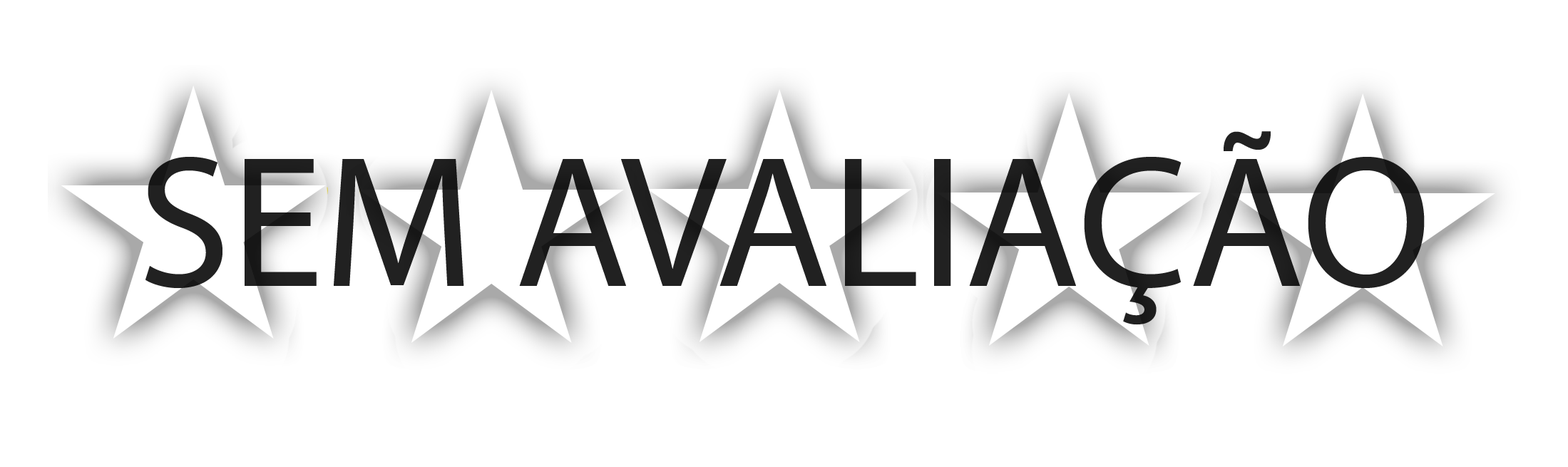
<style>
.page{position:relative;width:1568px;height:467px;background:#ffffff}
.page>*{position:absolute;margin:0}
.t1{font:188.8px "MyriadPro-Regular";color:#212121}
</style>
<div class="page">
<p class="t1" style="left:145px;top:131px;width:1280px;height:194px">SEM AVALIAÇÃO</p>
</div>
